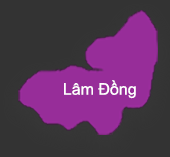
<style>
.page{position:relative;width:170px;height:157px;background:#333333}
.page>*{position:absolute;margin:0}
.t1{font:16px "ArialMT";color:#ffffff}
</style>
<div class="page">
<p class="t1" style="left:64px;top:80px;width:72px;height:19px">Lâm Đồng</p>
</div>
